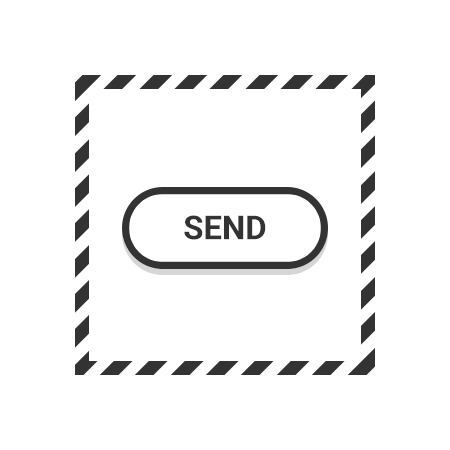
<style>
.page{position:relative;width:450px;height:450px;background:#ffffff}
.page>*{position:absolute;margin:0}
.t1{font:33px "Roboto-Bold";color:#333333}
</style>
<div class="page">
<p class="t1" style="left:184px;top:215px;width:82px;height:25px">SEND</p>
</div>
